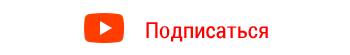
<style>
.page{position:relative;width:350px;height:55px;background:#ffffff}
.page>*{position:absolute;margin:0}
.t1{font:22px "Roboto-Condensed";color:#ff0000;scale:1.03 1}
</style>
<div class="page">
<p class="t1" style="left:146px;top:22px;width:122px;height:20px">Подписаться</p>
</div>
